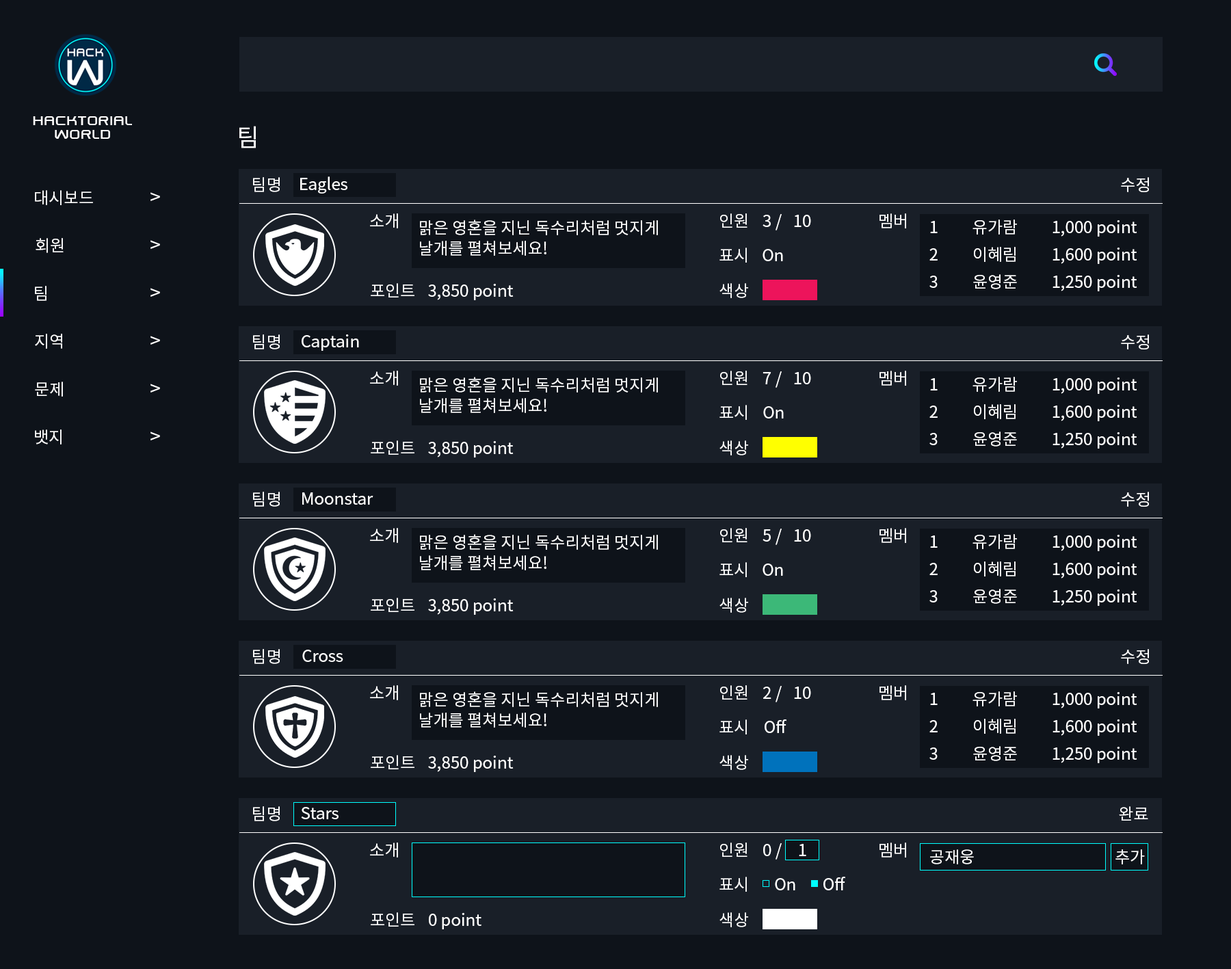
<style>
.page{position:relative;width:1231px;height:969px;background:#0e131a}
.page>*{position:absolute;margin:0}
.t1{font:16.4px/13.7px "SwiszRegular";color:#ffffff}
.t2{font:24.6px "NotoSansCJKkr-Regular";color:#ffffff}
.t3{font:16.4px "NotoSansCJKkr-Regular";color:#ffffff}
.t4{font:19.1px "NotoSansCJKkr-Regular";color:#ffffff}
.t5{font:16.4px/20.5px "NotoSansCJKkr-Regular";color:#ffffff}
.t6{font:16.4px/13.7px "NotoSansCJKkr-Regular";color:#ffffff}
</style>
<div class="page">
<p class="t1" style="left:33px;top:116px;width:99px;height:23px;text-align:center">hacktorial<br>world</p>
<p class="t2" style="left:239px;top:126px;width:17px;height:22px">팀</p>
<p class="t3" style="left:253px;top:177px;width:27px;height:15px">팀명</p>
<p class="t3" style="left:300px;top:176px;width:47px;height:18px">Eagles</p>
<p class="t3" style="left:1121px;top:177px;width:28px;height:15px">수정</p>
<p class="t3" style="left:35px;top:190px;width:58px;height:15px">대시보드</p>
<p class="t4" style="left:150px;top:192px;width:10px;height:9px">&gt;</p>
<p class="t3" style="left:370px;top:213px;width:28px;height:15px">소개</p>
<p class="t5" style="left:420px;top:219px;width:238px;height:37px">맑은 영혼을 지닌 독수리처럼 멋지게 <br>날개를 펼쳐보세요!</p>
<p class="t3" style="left:720px;top:213px;width:27px;height:15px">인원</p>
<p class="t3" style="left:762px;top:214px;width:20px;height:16px">3 /</p>
<p class="t3" style="left:794px;top:215px;width:17px;height:12px">10</p>
<p class="t3" style="left:879px;top:213px;width:27px;height:15px">멤버</p>
<p class="t6" style="left:929px;top:221px;width:8px;height:67px;text-align:center">1<br><br>2<br><br>3</p>
<p class="t6" style="left:972px;top:219px;width:45px;height:70px;text-align:center">유가람<br><br>이혜림<br><br>윤영준</p>
<p class="t6" style="left:1052px;top:220px;width:85px;height:71px;text-align:center">1,000 point<br><br>1,600 point<br><br>1,250 point</p>
<p class="t3" style="left:36px;top:238px;width:28px;height:15px">회원</p>
<p class="t4" style="left:150px;top:240px;width:10px;height:9px">&gt;</p>
<p class="t3" style="left:719px;top:248px;width:28px;height:15px">표시</p>
<p class="t3" style="left:762px;top:249px;width:21px;height:12px">On</p>
<p class="t3" style="left:35px;top:286px;width:11px;height:15px">팀</p>
<p class="t4" style="left:150px;top:288px;width:10px;height:9px">&gt;</p>
<p class="t3" style="left:371px;top:283px;width:43px;height:14px">포인트</p>
<p class="t3" style="left:428px;top:284px;width:85px;height:16px">3,850 point</p>
<p class="t3" style="left:719px;top:283px;width:29px;height:15px">색상</p>
<p class="t3" style="left:35px;top:334px;width:27px;height:15px">지역</p>
<p class="t4" style="left:150px;top:336px;width:10px;height:9px">&gt;</p>
<p class="t3" style="left:253px;top:334px;width:27px;height:15px">팀명</p>
<p class="t3" style="left:302px;top:334px;width:57px;height:17px">Captain</p>
<p class="t3" style="left:1121px;top:334px;width:28px;height:15px">수정</p>
<p class="t3" style="left:370px;top:371px;width:28px;height:15px">소개</p>
<p class="t5" style="left:420px;top:377px;width:238px;height:36px">맑은 영혼을 지닌 독수리처럼 멋지게 <br>날개를 펼쳐보세요!</p>
<p class="t3" style="left:720px;top:371px;width:27px;height:14px">인원</p>
<p class="t3" style="left:762px;top:371px;width:20px;height:17px">7 /</p>
<p class="t3" style="left:794px;top:372px;width:17px;height:12px">10</p>
<p class="t3" style="left:879px;top:371px;width:27px;height:15px">멤버</p>
<p class="t6" style="left:972px;top:377px;width:45px;height:69px;text-align:center">유가람<br><br>이혜림<br><br>윤영준</p>
<p class="t6" style="left:1052px;top:377px;width:85px;height:72px;text-align:center">1,000 point<br><br>1,600 point<br><br>1,250 point</p>
<p class="t3" style="left:35px;top:382px;width:28px;height:15px">문제</p>
<p class="t4" style="left:150px;top:384px;width:10px;height:8px">&gt;</p>
<p class="t6" style="left:929px;top:378px;width:8px;height:67px;text-align:center">1<br><br>2<br><br>3</p>
<p class="t3" style="left:719px;top:405px;width:28px;height:15px">표시</p>
<p class="t3" style="left:763px;top:406px;width:21px;height:12px">On</p>
<p class="t3" style="left:35px;top:429px;width:27px;height:15px">뱃지</p>
<p class="t4" style="left:150px;top:431px;width:10px;height:9px">&gt;</p>
<p class="t3" style="left:371px;top:440px;width:43px;height:15px">포인트</p>
<p class="t3" style="left:428px;top:441px;width:85px;height:16px">3,850 point</p>
<p class="t3" style="left:719px;top:440px;width:29px;height:15px">색상</p>
<p class="t3" style="left:253px;top:492px;width:27px;height:15px">팀명</p>
<p class="t3" style="left:302px;top:492px;width:71px;height:13px">Moonstar</p>
<p class="t3" style="left:1121px;top:492px;width:28px;height:15px">수정</p>
<p class="t3" style="left:370px;top:528px;width:28px;height:15px">소개</p>
<p class="t3" style="left:720px;top:528px;width:27px;height:14px">인원</p>
<p class="t3" style="left:762px;top:529px;width:20px;height:16px">5 /</p>
<p class="t3" style="left:794px;top:529px;width:17px;height:13px">10</p>
<p class="t3" style="left:879px;top:528px;width:27px;height:15px">멤버</p>
<p class="t5" style="left:420px;top:534px;width:238px;height:36px">맑은 영혼을 지닌 독수리처럼 멋지게 <br>날개를 펼쳐보세요!</p>
<p class="t6" style="left:929px;top:535px;width:8px;height:67px;text-align:center">1<br><br>2<br><br>3</p>
<p class="t6" style="left:972px;top:534px;width:45px;height:70px;text-align:center">유가람<br><br>이혜림<br><br>윤영준</p>
<p class="t6" style="left:1052px;top:535px;width:85px;height:71px;text-align:center">1,000 point<br><br>1,600 point<br><br>1,250 point</p>
<p class="t3" style="left:719px;top:562px;width:28px;height:15px">표시</p>
<p class="t3" style="left:762px;top:563px;width:21px;height:13px">On</p>
<p class="t3" style="left:371px;top:598px;width:43px;height:14px">포인트</p>
<p class="t3" style="left:428px;top:598px;width:85px;height:17px">3,850 point</p>
<p class="t3" style="left:719px;top:598px;width:29px;height:15px">색상</p>
<p class="t3" style="left:253px;top:649px;width:27px;height:15px">팀명</p>
<p class="t3" style="left:302px;top:650px;width:41px;height:12px">Cross</p>
<p class="t3" style="left:1121px;top:649px;width:28px;height:15px">수정</p>
<p class="t3" style="left:370px;top:685px;width:28px;height:15px">소개</p>
<p class="t3" style="left:720px;top:685px;width:27px;height:14px">인원</p>
<p class="t3" style="left:763px;top:686px;width:19px;height:16px">2 /</p>
<p class="t3" style="left:794px;top:686px;width:17px;height:13px">10</p>
<p class="t3" style="left:879px;top:685px;width:27px;height:15px">멤버</p>
<p class="t5" style="left:420px;top:691px;width:238px;height:37px">맑은 영혼을 지닌 독수리처럼 멋지게 <br>날개를 펼쳐보세요!</p>
<p class="t6" style="left:929px;top:693px;width:8px;height:67px;text-align:center">1<br><br>2<br><br>3</p>
<p class="t6" style="left:972px;top:691px;width:45px;height:70px;text-align:center">유가람<br><br>이혜림<br><br>윤영준</p>
<p class="t6" style="left:1052px;top:692px;width:85px;height:71px;text-align:center">1,000 point<br><br>1,600 point<br><br>1,250 point</p>
<p class="t3" style="left:719px;top:719px;width:28px;height:15px">표시</p>
<p class="t3" style="left:764px;top:719px;width:22px;height:14px">Off</p>
<p class="t3" style="left:371px;top:755px;width:43px;height:14px">포인트</p>
<p class="t3" style="left:428px;top:756px;width:85px;height:16px">3,850 point</p>
<p class="t3" style="left:719px;top:755px;width:29px;height:15px">색상</p>
<p class="t3" style="left:253px;top:806px;width:27px;height:15px">팀명</p>
<p class="t3" style="left:301px;top:807px;width:37px;height:12px">Stars</p>
<p class="t3" style="left:1119px;top:806px;width:29px;height:14px">완료</p>
<p class="t3" style="left:370px;top:842px;width:28px;height:15px">소개</p>
<p class="t3" style="left:720px;top:842px;width:27px;height:15px">인원</p>
<p class="t3" style="left:763px;top:843px;width:19px;height:16px">0 /</p>
<p class="t3" style="left:799px;top:844px;width:7px;height:12px">1</p>
<p class="t3" style="left:879px;top:842px;width:27px;height:15px">멤버</p>
<p class="t3" style="left:930px;top:849px;width:44px;height:15px">공재웅</p>
<p class="t3" style="left:1115px;top:849px;width:30px;height:15px">추가</p>
<p class="t3" style="left:719px;top:877px;width:28px;height:15px">표시</p>
<p class="t3" style="left:775px;top:878px;width:20px;height:12px">On</p>
<p class="t3" style="left:823px;top:877px;width:22px;height:13px">Off</p>
<p class="t3" style="left:371px;top:912px;width:43px;height:14px">포인트</p>
<p class="t3" style="left:429px;top:913px;width:52px;height:16px">0 point</p>
<p class="t3" style="left:719px;top:912px;width:29px;height:15px">색상</p>
</div>
